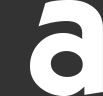
<style>
.page{position:relative;width:103px;height:96px;background:#333333}
.page>*{position:absolute;margin:0}
.t1{font:168px "ELEGANCE";color:#ffffff}
</style>
<div class="page">
<p class="t1" style="left:30px;top:0px;width:73px;height:96px">a</p>
</div>
